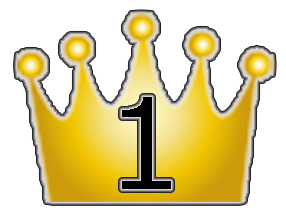
<style>
.page{position:relative;width:286px;height:220px;background:#ffffff}
.page>*{position:absolute;margin:0}
.t1{font:125px "Meiryo";color:#000000}
</style>
<div class="page">
<p class="t1" style="left:122px;top:97px;width:49px;height:92px">１</p>
</div>
